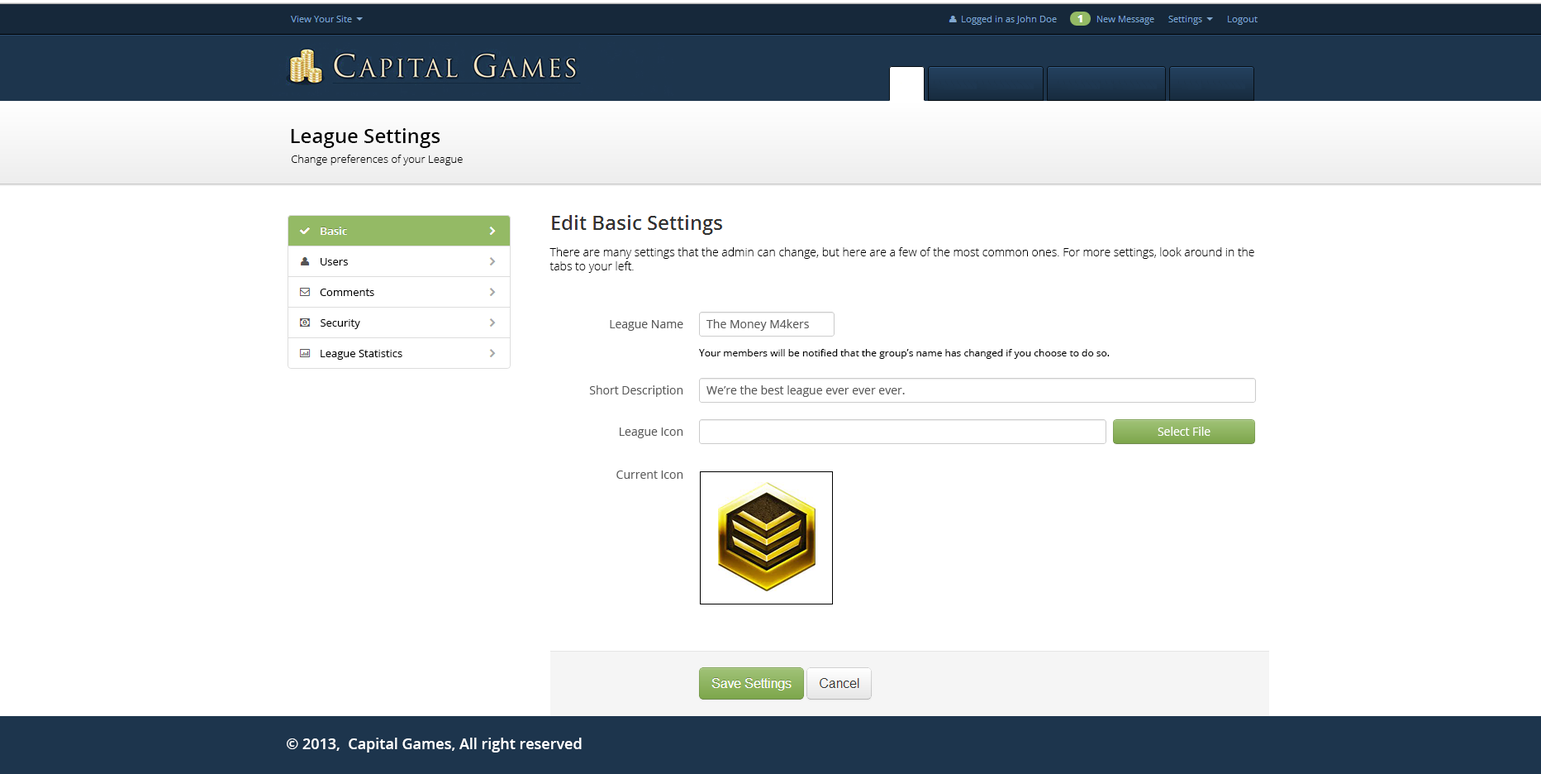
<style>
.page{position:relative;width:1541px;height:774px;background:#ffffff}
.page>*{position:absolute;margin:0}
.t1{font:19.8px "OpenSans-Semibold";color:#000000}
.t2{font:10.7px "OpenSans-Light";color:#000000}
.t3{font:10.7px "OpenSans";color:#000000}
.t4{font:11.6px "OpenSans-Light";color:#000000}
.t5{font:11.6px "OpenSans";color:#595959}
.t6{font:9.9px "OpenSans";color:#000000}
.t7{font:11.6px "OpenSans";color:#ffffff}
.t8{font:14.9px "OpenSans-Semibold";color:#ffffff}
</style>
<div class="page">
<p class="t1" style="left:291px;top:128px;width:150px;height:20px">League Settings</p>
<p class="t2" style="left:292px;top:155px;width:171px;height:10px">Change preferences of your League</p>
<p class="t3" style="left:321px;top:258px;width:27px;height:7px">Users</p>
<p class="t4" style="left:550px;top:247px;width:705px;height:26px">There are many settings that the admin can change, but here are a few of the most common ones. For more settings, look around in the <br>tabs to your left.</p>
<p class="t3" style="left:320px;top:288px;width:54px;height:8px">Comments</p>
<p class="t3" style="left:321px;top:319px;width:39px;height:10px">Security</p>
<p class="t5" style="left:610px;top:320px;width:74px;height:11px">League Name</p>
<p class="t5" style="left:707px;top:319px;width:102px;height:12px">The Money M4kers</p>
<p class="t3" style="left:321px;top:350px;width:82px;height:10px">League Statistics</p>
<p class="t6" style="left:699px;top:349px;width:411px;height:10px">Your members will be notified that the group’s name has changed if you choose to do so.</p>
<p class="t5" style="left:589px;top:385px;width:95px;height:12px">Short Description</p>
<p class="t5" style="left:707px;top:385px;width:198px;height:12px">We’re the best league ever ever ever.</p>
<p class="t5" style="left:620px;top:427px;width:64px;height:11px">League Icon</p>
<p class="t7" style="left:1158px;top:426px;width:53px;height:10px">Select File</p>
<p class="t5" style="left:617px;top:470px;width:67px;height:9px">Current Icon</p>
<p class="t8" style="left:287px;top:737px;width:295px;height:15px">© 2013,  Capital Games, All right reserved</p>
</div>
